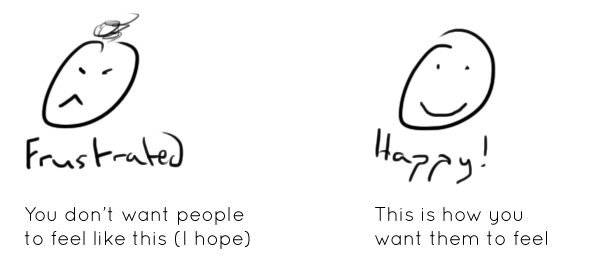
<style>
.page{position:relative;width:603px;height:263px;background:#ffffff}
.page>*{position:absolute;margin:0}
.t1{font:20px "QuicksandBook-Regular";color:#000000}
</style>
<div class="page">
<p class="t1" style="left:24px;top:207px;width:226px;height:42px">You don’t want people<br>to feel like this (I hope)</p>
<p class="t1" style="left:375px;top:207px;width:172px;height:38px">This is how you<br>want them to feel</p>
</div>
